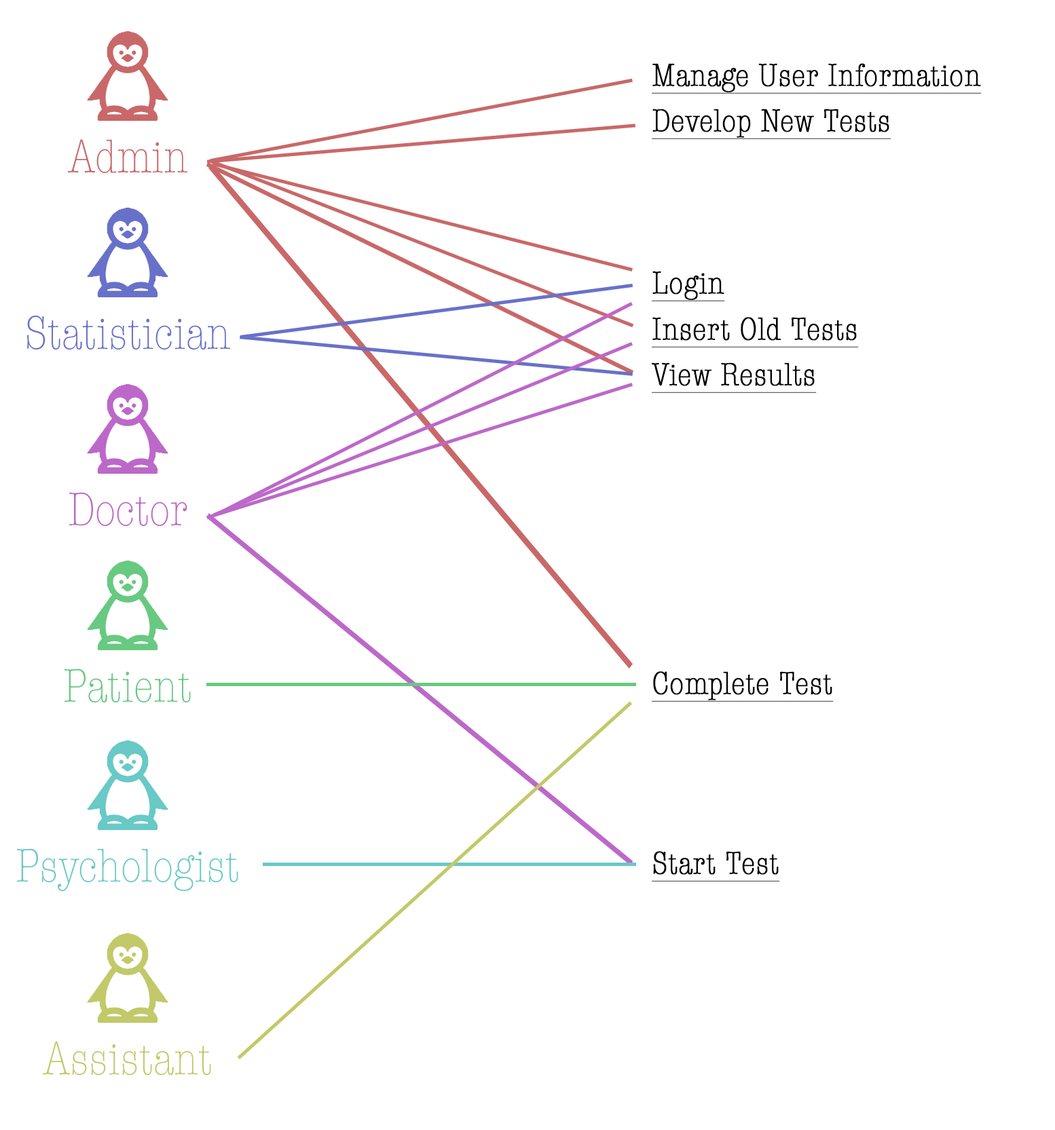
<style>
.page{position:relative;width:1055px;height:1130px;background:#ffffff}
.page>*{position:absolute;margin:0}
.t1{font:32.6px "AmericanTypewriter-CondensedLight";color:#000000;font-weight:bold;text-decoration:underline}
.t2{font:48.9px "AmericanTypewriter-CondensedLight";color:#c96868}
.t3{font:48.9px "AmericanTypewriter-CondensedLight";color:#6871c9}
.t4{font:48.9px "AmericanTypewriter-CondensedLight";color:#bc68c9}
.t5{font:48.9px "AmericanTypewriter-CondensedLight";color:#68c981}
.t6{font:48.9px "AmericanTypewriter-CondensedLight";color:#68c9c6}
.t7{font:48.9px "AmericanTypewriter-CondensedLight";color:#c1c968}
</style>
<div class="page">
<p class="t1" style="left:652px;top:63px;width:330px;height:31px">Manage User Information</p>
<p class="t1" style="left:652px;top:109px;width:239px;height:30px">Develop New Tests</p>
<p class="t2" style="left:68px;top:139px;width:120px;height:34px">Admin</p>
<p class="t1" style="left:652px;top:271px;width:73px;height:30px">Login</p>
<p class="t3" style="left:27px;top:316px;width:204px;height:34px">Statistician</p>
<p class="t1" style="left:652px;top:317px;width:207px;height:31px">Insert Old Tests</p>
<p class="t1" style="left:652px;top:363px;width:165px;height:30px">View Results</p>
<p class="t4" style="left:69px;top:492px;width:118px;height:34px">Doctor</p>
<p class="t5" style="left:64px;top:669px;width:127px;height:34px">Patient</p>
<p class="t1" style="left:652px;top:671px;width:182px;height:31px">Complete Test</p>
<p class="t6" style="left:17px;top:849px;width:221px;height:42px">Psychologist</p>
<p class="t1" style="left:652px;top:851px;width:128px;height:31px">Start Test</p>
<p class="t7" style="left:43px;top:1041px;width:168px;height:34px">Assistant</p>
</div>
